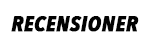
<style>
.page{position:relative;width:150px;height:50px;background:#ffffff}
.page>*{position:absolute;margin:0}
.t1{font:21.1px "AvenirNextCondensed-BoldItalic";color:#020202;text-transform:uppercase;font-weight:bold;scale:1.05 1}
</style>
<div class="page">
<p class="t1" style="left:11px;top:16px;width:128px;height:16px">recensioner</p>
</div>
